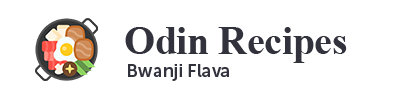
<style>
.page{position:relative;width:400px;height:100px;background:#ffffff}
.page>*{position:absolute;margin:0}
.t1{font:40px "TimesNewRomanPS-BoldMT";letter-spacing:-0.01em;color:#32323d}
.t2{font:18px "MuseoSans-700";letter-spacing:-0.01em;color:#32323d}
</style>
<div class="page">
<p class="t1" style="left:125px;top:27px;width:222px;height:36px">Odin Recipes</p>
<p class="t2" style="left:128px;top:64px;width:101px;height:17px">Bwanji Flava</p>
</div>
